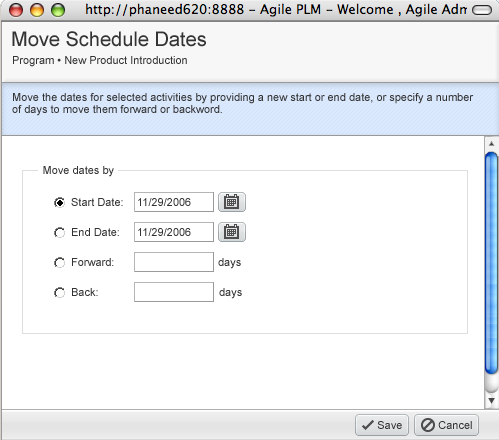
<style>
.page{position:relative;width:499px;height:440px;background:#ffffff}
.page>*{position:absolute;margin:0}
.t1{font:20px "ArialMT";color:#333333}
.t2{font:11px "ArialMT";color:#333333}
.t3{font:11px/12px "ArialMT";color:#333333}
</style>
<div class="page">
<p class="t1" style="left:12px;top:31px;width:194px;height:16px">Move Schedule Dates</p>
<p class="t2" style="left:13px;top:56px;width:174px;height:11px">Program • New Product Introduction</p>
<p class="t3" style="left:12px;top:93px;width:462px;height:23px">Move the dates for selected activities by providing a new start or end date, or specify a number<br>of days to move them forward or backword.</p>
<p class="t2" style="left:43px;top:166px;width:71px;height:11px">Move dates by</p>
<p class="t2" style="left:71px;top:198px;width:52px;height:8px">Start Date:</p>
<p class="t2" style="left:138px;top:198px;width:53px;height:8px">11/29/2006</p>
<p class="t2" style="left:72px;top:228px;width:47px;height:8px">End Date:</p>
<p class="t2" style="left:138px;top:228px;width:53px;height:8px">11/29/2006</p>
<p class="t2" style="left:72px;top:258px;width:42px;height:8px">Forward:</p>
<p class="t2" style="left:218px;top:258px;width:23px;height:11px">days</p>
<p class="t2" style="left:72px;top:288px;width:26px;height:8px">Back:</p>
<p class="t2" style="left:219px;top:288px;width:23px;height:11px">days</p>
<p class="t2" style="left:377px;top:421px;width:25px;height:8px">Save</p>
<p class="t2" style="left:438px;top:421px;width:34px;height:8px">Cancel</p>
</div>
